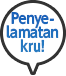
<style>
.page{position:relative;width:66px;height:76px;background:#ffffff}
.page>*{position:absolute;margin:0}
.t1{font:15px/14px "UDShinGoPro-Bold";letter-spacing:-0.04em;color:#1c68bb;scale:0.9 1}
</style>
<div class="page">
<p class="t1" style="left:6px;top:12px;width:53px;height:41px;text-align:center">Penye-<br>lamatan<br>kru!</p>
</div>
